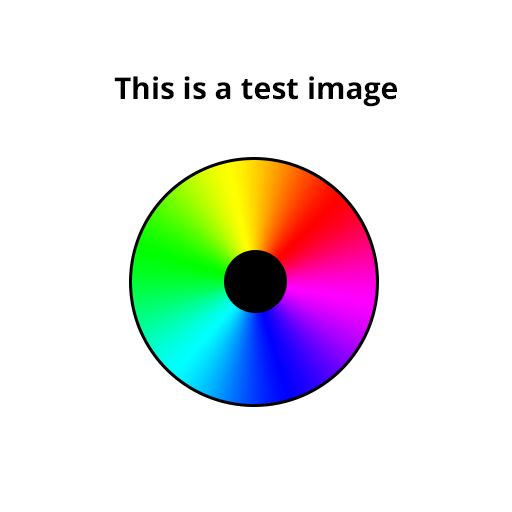
<style>
.page{position:relative;width:512px;height:512px;background:#ffffff}
.page>*{position:absolute;margin:0}
.t1{font:30px "OpenSans-Bold";color:#000000}
</style>
<div class="page">
<p class="t1" style="left:114px;top:76px;width:283px;height:31px">This is a test image</p>
</div>
